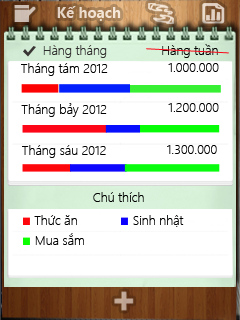
<style>
.page{position:relative;width:240px;height:320px;background:#ffffff}
.page>*{position:absolute;margin:0}
.t1{font:15px "SegoeUI-Bold";color:#efe0d0}
.t2{font:13px "SegoeUI-Light";color:#302d2d}
.t3{font:13px "SegoeUI-Light";color:#000000}
</style>
<div class="page">
<p class="t1" style="left:57px;top:6px;width:64px;height:15px">Kế hoạch</p>
<p class="t2" style="left:43px;top:45px;width:64px;height:13px">Hàng tháng</p>
<p class="t3" style="left:162px;top:44px;width:56px;height:14px">Hàng tuần</p>
<p class="t3" style="left:21px;top:63px;width:87px;height:13px">Tháng tám 2012</p>
<p class="t3" style="left:168px;top:63px;width:51px;height:9px">1.000.000</p>
<p class="t3" style="left:21px;top:103px;width:86px;height:14px">Tháng bảy 2012</p>
<p class="t3" style="left:168px;top:103px;width:51px;height:9px">1.200.000</p>
<p class="t3" style="left:22px;top:145px;width:84px;height:13px">Tháng sáu 2012</p>
<p class="t3" style="left:167px;top:145px;width:50px;height:9px">1.300.000</p>
<p class="t3" style="left:93px;top:192px;width:51px;height:10px">Chú thích</p>
<p class="t3" style="left:34px;top:215px;width:43px;height:10px">Thức ăn</p>
<p class="t3" style="left:133px;top:215px;width:51px;height:12px">Sinh nhật</p>
<p class="t3" style="left:35px;top:233px;width:49px;height:12px">Mua sắm</p>
</div>
